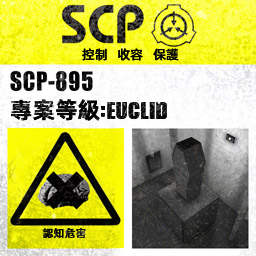
<style>
.page{position:relative;width:256px;height:256px}
.page>*{position:absolute;margin:0}
.t1{font:13px "AlibabaPuHuiTiM";color:#000000}
.t2{font:26px "URWImpactW01-Bold";letter-spacing:0.02em;color:#000000}
.t3{font:23px "AlibabaPuHuiTiB";color:#000000}
.t4{font:31px "URWImpactW01-Bold";letter-spacing:0.02em;color:#000000}
.t5{font:11px "AlibabaPuHuiTiM";letter-spacing:0.02em;color:#000000}
</style>
<div class="page">
<p class="t1" style="left:82px;top:48px;width:97px;height:13px">控制   收容   保護</p>
<p class="t2" style="left:11px;top:99px;width:156px;height:22px"><span class="t3">專案等級</span><span class="t4">:</span>EUCLID</p>
<p class="t5" style="left:42px;top:228px;width:44px;height:11px">認知危害</p>
</div>
